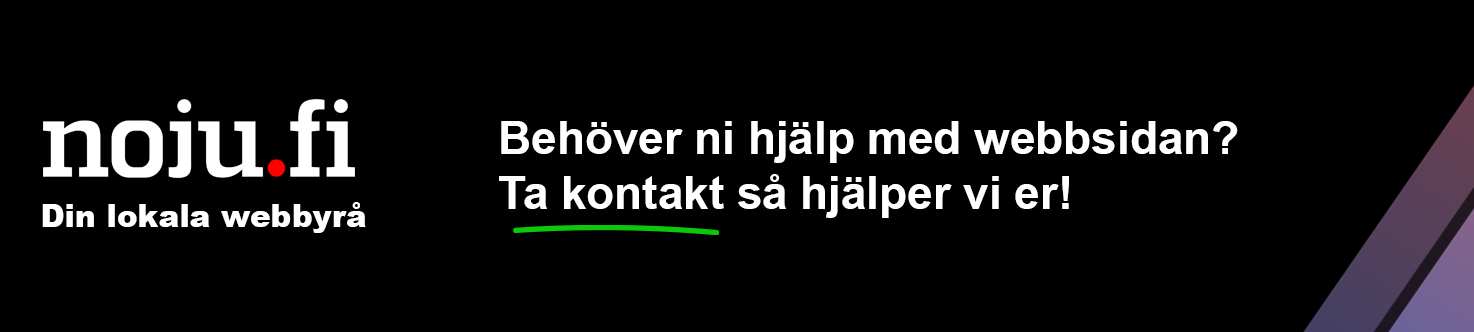
<style>
.page{position:relative;width:1474px;height:332px;background:#000000}
.page>*{position:absolute;margin:0}
.t1{font:45.8px "Arial-BoldMT";color:#ffffff}
.t2{font:31.2px "Arial-Black";color:#ffffff}
</style>
<div class="page">
<p class="t1" style="left:499px;top:121px;width:739px;height:97px">Behöver ni hjälp med webbsidan?<br>Ta kontakt så hjälper vi er!</p>
<p class="t2" style="left:42px;top:202px;width:324px;height:31px">Din lokala webbyrå</p>
</div>
